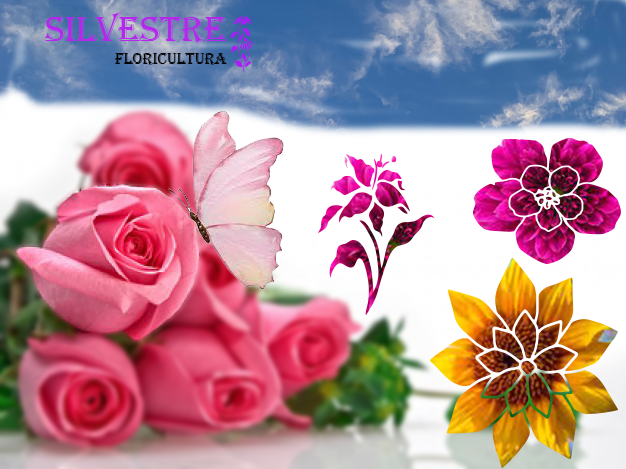
<style>
.page{position:relative;width:626px;height:469px}
.page>*{position:absolute;margin:0}
.t1{font:36px "Algerian";color:#b527ed}
.t2{font:16px "Algerian";color:#030303}
</style>
<div class="page">
<p class="t1" style="left:44px;top:11px;width:183px;height:33px">silvestre</p>
<p class="t2" style="left:115px;top:53px;width:112px;height:12px">floricultura</p>
</div>
